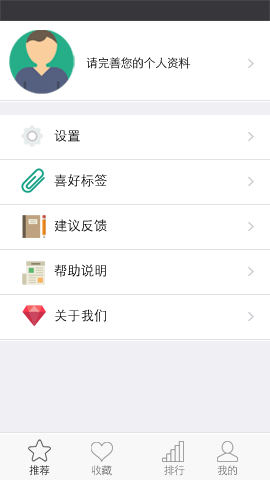
<style>
.page{position:relative;width:270px;height:480px;background:#ffffff}
.page>*{position:absolute;margin:0}
.t1{font:12px "STXihei";letter-spacing:-0.04em}
.t2{font:13.3px "STXihei";color:#000000}
.t3{font:13.3px "STXihei"}
.t4{font:10.7px "STXihei";letter-spacing:-0.04em}
.t5{font:10.7px "STXihei";letter-spacing:-0.04em;color:#676767}
</style>
<div class="page">
<p class="t1" style="left:86px;top:57px;width:104px;height:12px">请完善您的个人资料</p>
<p class="t2" style="left:54px;top:129px;width:26px;height:13px">设置</p>
<p class="t3" style="left:54px;top:174px;width:53px;height:13px">喜好标签</p>
<p class="t2" style="left:54px;top:219px;width:53px;height:13px">建议反馈</p>
<p class="t3" style="left:54px;top:264px;width:52px;height:13px">帮助说明</p>
<p class="t2" style="left:55px;top:309px;width:51px;height:13px">关于我们</p>
<p class="t4" style="left:29px;top:465px;width:21px;height:11px">推荐</p>
<p class="t5" style="left:91px;top:465px;width:21px;height:11px">收藏</p>
<p class="t4" style="left:164px;top:465px;width:21px;height:11px">排行</p>
<p class="t4" style="left:217px;top:465px;width:20px;height:11px">我的</p>
</div>
